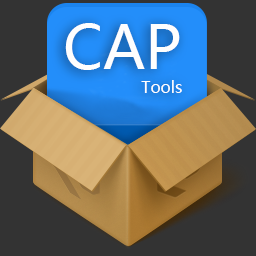
<style>
.page{position:relative;width:256px;height:256px;background:#333333}
.page>*{position:absolute;margin:0}
.t1{font:60px "MicrosoftYaHei";color:#fefefe}
.t2{font:16px "MicrosoftYaHei";color:#fefefe}
</style>
<div class="page">
<p class="t1" style="left:65px;top:23px;width:115px;height:47px">CAP</p>
<p class="t2" style="left:141px;top:80px;width:41px;height:13px">Tools</p>
</div>
